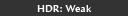
<style>
.page{position:relative;width:128px;height:16px;background:#333333}
.page>*{position:absolute;margin:0}
.t1{font:10px "AmiraParadiso";letter-spacing:0.05em;color:#ffffff}
</style>
<div class="page">
<p class="t1" style="left:37px;top:5px;width:55px;height:7px">HDR: Weak</p>
</div>
